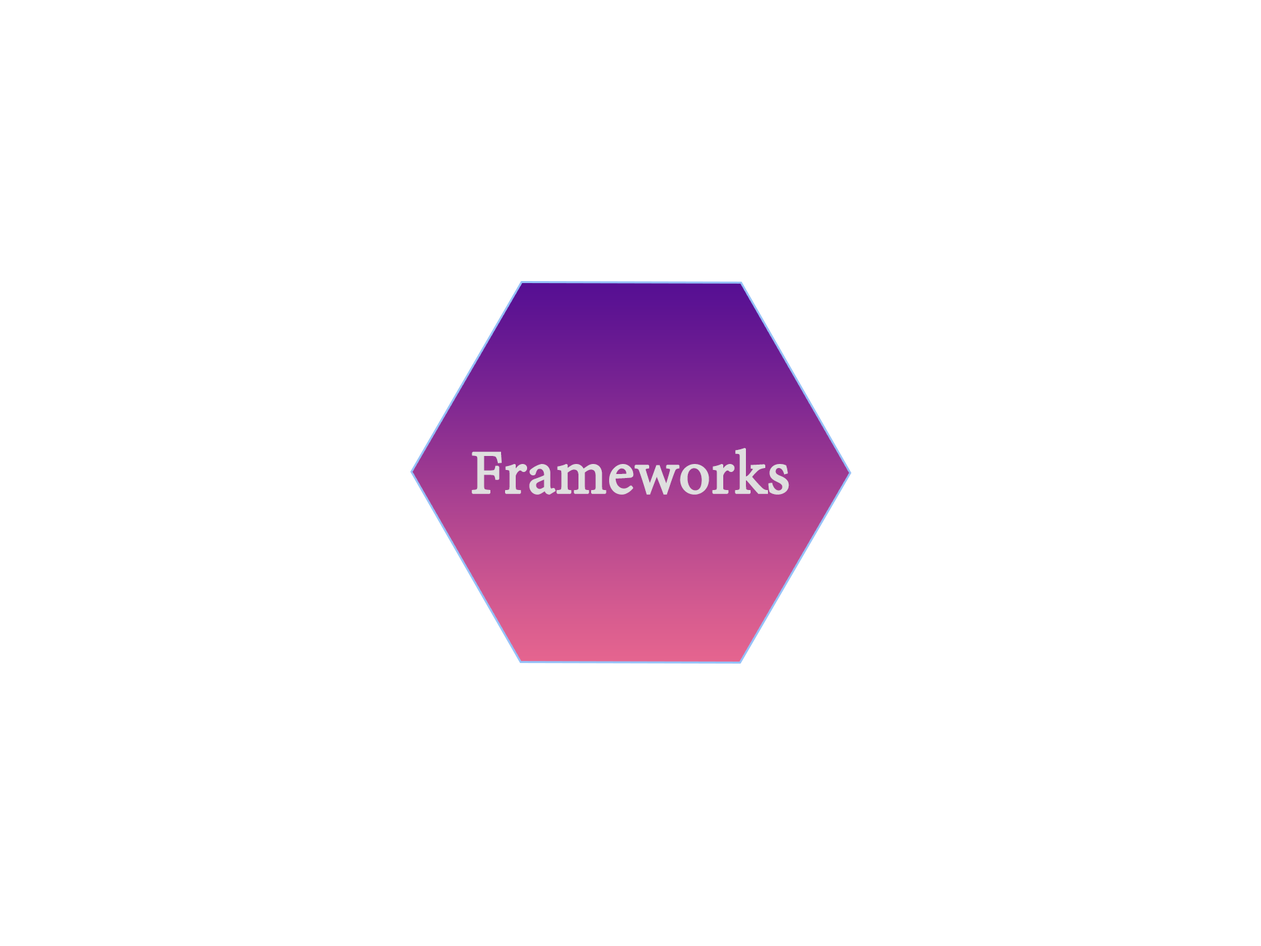
<style>
.page{position:relative;width:1261px;height:946px;background:#ffffff}
.page>*{position:absolute;margin:0}
.t1{font:66.7px "AdobeDevanagari-Regular";color:#dfdfdf;font-weight:bold}
</style>
<div class="page">
<p class="t1" style="left:472px;top:448px;width:317px;height:46px">Frameworks</p>
</div>
